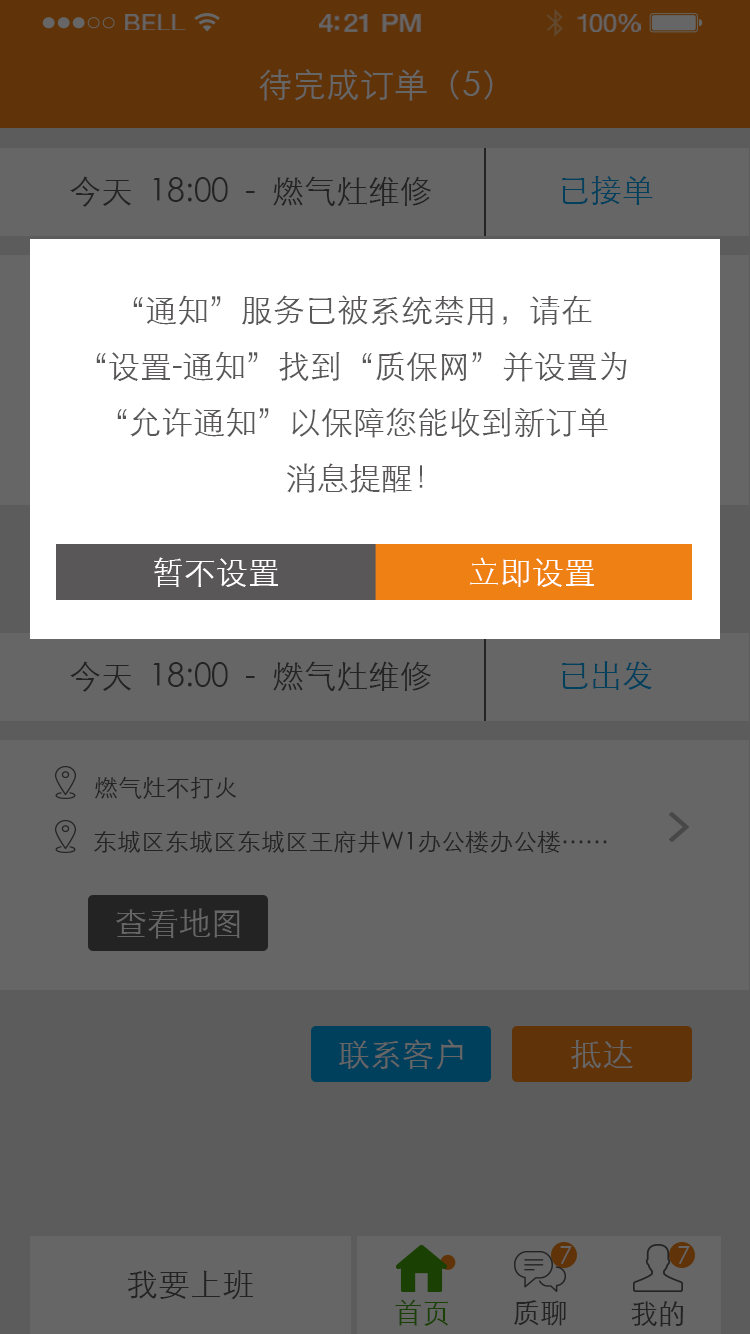
<style>
.page{position:relative;width:750px;height:1334px;background:#666666}
.page>*{position:absolute;margin:0}
.t1{font:23.3px "HelveticaNeue";letter-spacing:0.02em;color:#666666;scale:1.06 1}
.t2{font:25.3px "HelveticaNeue-Medium";letter-spacing:-0.02em;color:#666666;scale:1.06 1}
.t3{font:24.3px "HelveticaNeue";letter-spacing:-0.02em;color:#666666;scale:1.06 1}
.t4{font:34px "STXihei";color:#666666}
.t5{font:32px "STXihei";color:#242323}
.t6{font:32px "STXihei";color:#00405d}
.t7{font:32px/56px "STXihei";color:#595757}
.t8{font:32px "STXihei";color:#ffffff}
.t9{font:24px "STXihei";color:#242323}
.t10{font:32px "STXihei";color:#666666}
.t11{font:24px "STXihei";color:#666666}
.t12{font:28px "STXihei";color:#1a4004}
.t13{font:28px "STXihei";color:#242323}
</style>
<div class="page">
<p class="t1" style="left:125px;top:14px;width:61px;height:16px">BELL</p>
<p class="t2" style="left:319px;top:14px;width:102px;height:18px">4:21 PM</p>
<p class="t3" style="left:577px;top:14px;width:64px;height:18px">100%</p>
<p class="t4" style="left:259px;top:69px;width:234px;height:32px">待完成订单（5）</p>
<p class="t5" style="left:70px;top:176px;width:361px;height:31px">今天  18:00  -  燃气灶维修</p>
<p class="t6" style="left:562px;top:176px;width:91px;height:29px">已接单</p>
<p class="t7" style="left:96px;top:295px;width:531px;height:198px;text-align:center">“通知”服务已被系统禁用，请在<br>“设置-通知”找到“质保网”并设置为<br>“允许通知”以保障您能收到新订单<br>   消息提醒！</p>
<p class="t8" style="left:154px;top:557px;width:124px;height:30px">暂不设置</p>
<p class="t8" style="left:470px;top:557px;width:124px;height:30px">立即设置</p>
<p class="t5" style="left:70px;top:661px;width:361px;height:31px">今天  18:00  -  燃气灶维修</p>
<p class="t6" style="left:562px;top:661px;width:90px;height:29px">已出发</p>
<p class="t9" style="left:95px;top:776px;width:141px;height:23px">燃气灶不打火</p>
<p class="t9" style="left:94px;top:830px;width:513px;height:23px">东城区东城区东城区王府井W1办公楼办公楼……</p>
<p class="t10" style="left:116px;top:908px;width:124px;height:31px">查看地图</p>
<p class="t10" style="left:339px;top:1039px;width:124px;height:31px">联系客户</p>
<p class="t10" style="left:571px;top:1040px;width:62px;height:29px">抵达</p>
<p class="t11" style="left:560px;top:1246px;width:12px;height:18px">7</p>
<p class="t11" style="left:678px;top:1246px;width:12px;height:18px">7</p>
<p class="t5" style="left:128px;top:1270px;width:125px;height:30px">我要上班</p>
<p class="t12" style="left:395px;top:1299px;width:53px;height:27px">首页</p>
<p class="t13" style="left:514px;top:1300px;width:52px;height:26px">质聊</p>
<p class="t13" style="left:631px;top:1301px;width:53px;height:26px">我的</p>
</div>
